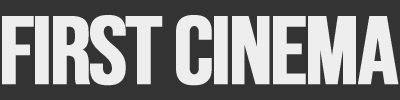
<style>
.page{position:relative;width:400px;height:100px;background:#333333}
.page>*{position:absolute;margin:0}
.t1{font:95.2px "BebasNeue-Regular";letter-spacing:-0.04em;color:#eeeeee;text-transform:uppercase;font-weight:bold;scale:1.05 1}
</style>
<div class="page">
<p class="t1" style="left:2px;top:15px;width:397px;height:71px">First Cinema</p>
</div>
